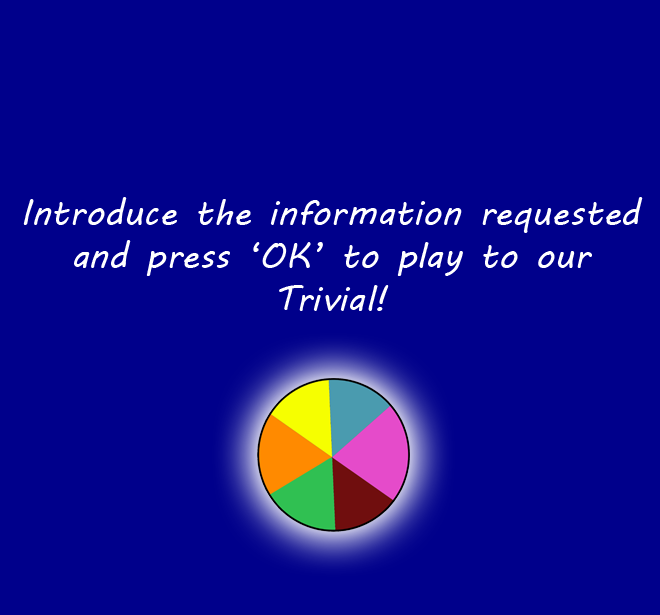
<style>
.page{position:relative;width:660px;height:615px;background:#00008b}
.page>*{position:absolute;margin:0}
.t1{font:36px "MVBoli";color:#ffffff}
</style>
<div class="page">
<p class="t1" style="left:23px;top:197px;width:620px;height:114px;text-align:center">Introduce the information requested<br>and press ‘OK’ to play to our<br>Trivial!</p>
</div>
